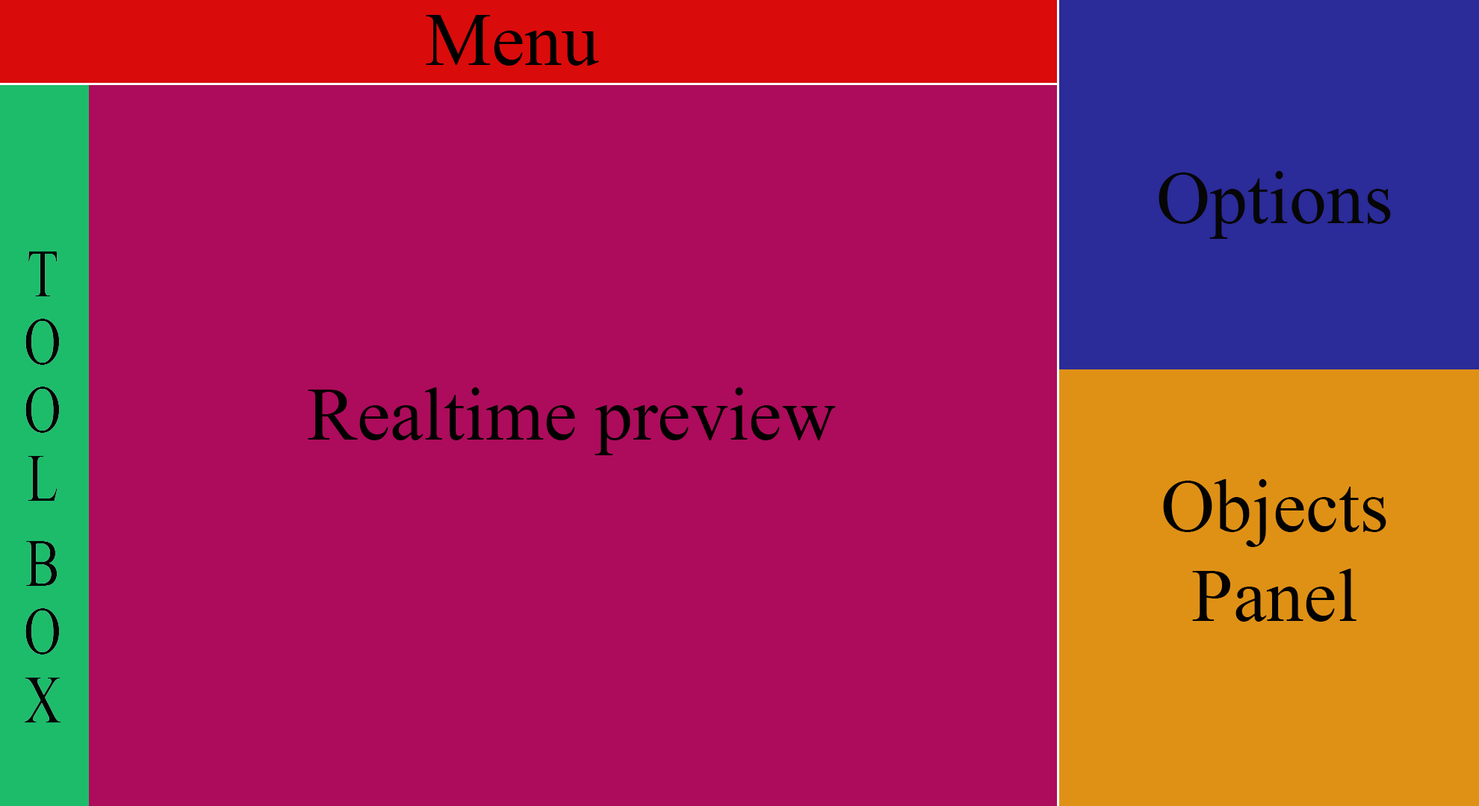
<style>
.page{position:relative;width:1479px;height:806px;background:#ac0c5b}
.page>*{position:absolute;margin:0}
.t1{font:74.7px "TimesNewRomanPSMT";color:#000000}
.t2{font:74.7px "TimesNewRomanPSMT";color:#060606}
.t3{font:74.7px "TimesNewRomanPSMT";color:#020202}
</style>
<div class="page">
<p class="t1" style="left:426px;top:15px;width:173px;height:51px">Menu</p>
<p class="t2" style="left:1158px;top:171px;width:232px;height:68px">Options</p>
<p class="t1" style="left:308px;top:388px;width:528px;height:68px">Realtime preview</p>
<p class="t3" style="left:1163px;top:479px;width:223px;height:143px;text-align:center">Objects Panel</p>
</div>
